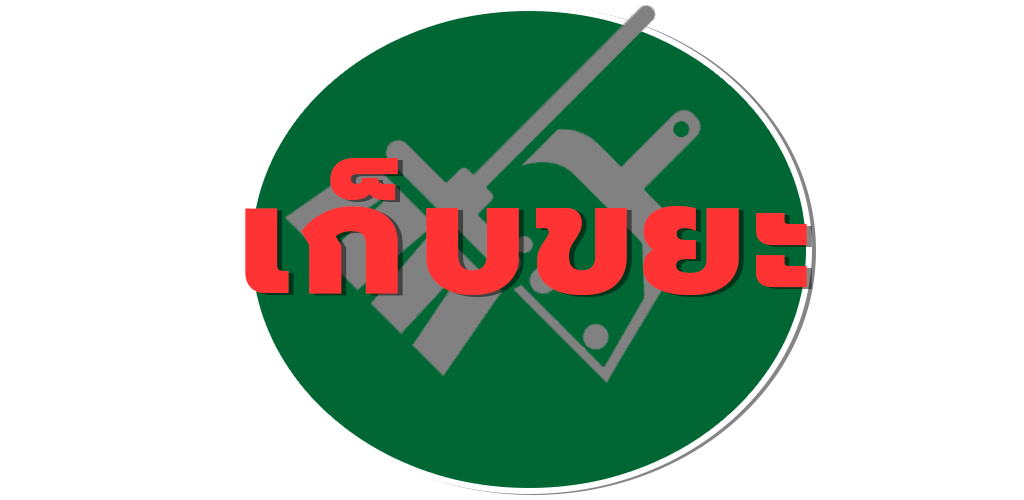
<style>
.page{position:relative;width:1024px;height:500px;background:#ffffff}
.page>*{position:absolute;margin:0}
.t1{font:158.4px "Prompt-ExtraBold";letter-spacing:0.05em;color:#ff3333}
</style>
<div class="page">
<p class="t1" style="left:245px;top:158px;width:562px;height:137px">เก็บขยะ</p>
</div>
